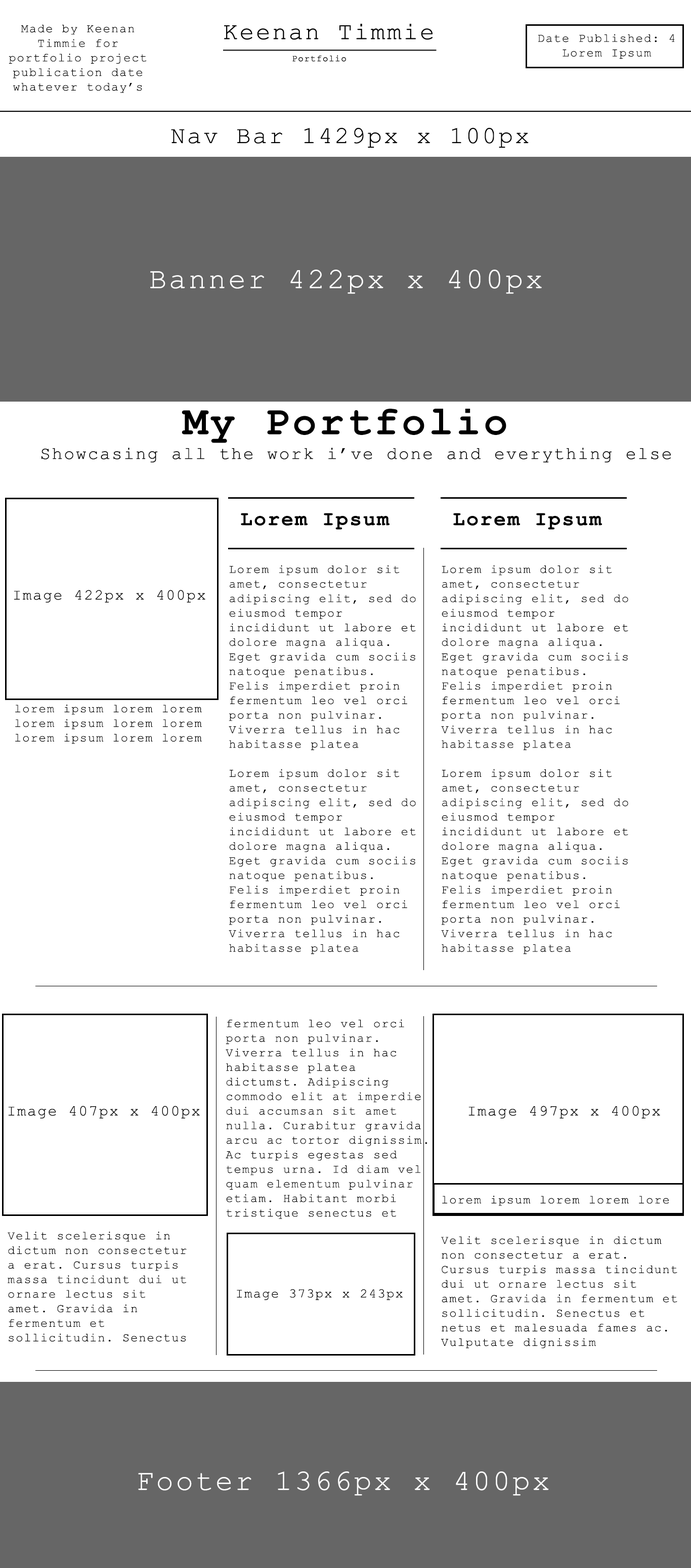
<style>
.page{position:relative;width:691px;height:1568px;background:#ffffff}
.page>*{position:absolute;margin:0}
.t1{font:12.1px "CourierNewPSMT";letter-spacing:0.075em;color:#000000}
.t2{font:24.3px "CourierNewPSMT";letter-spacing:0.075em;color:#000000}
.t3{font:29.3px "CourierNewPSMT";letter-spacing:0.075em;color:#ffffff}
.t4{font:40.5px "CourierNewPS-BoldMT";letter-spacing:0.075em;color:#000000}
.t5{font:17.7px "CourierNewPSMT";letter-spacing:0.075em;color:#000000}
.t6{font:20.2px "CourierNewPS-BoldMT";letter-spacing:0.075em;color:#000000}
.t7{font:15.2px "CourierNewPSMT";letter-spacing:0.075em;color:#000000}
.t8{font:13.1px "CourierNewPSMT";letter-spacing:0.075em;color:#000000}
</style>
<div class="page">
<p class="t1" style="left:9px;top:25px;width:138px;height:68px;text-align:center">Made by Keenan Timmie for portfolio project publication date<br>whatever today’s date is</p>
<p class="t1" style="left:538px;top:34px;width:137px;height:25px;text-align:center">Date Published: 4 Lorem Ipsum</p>
<p class="t2" style="left:171px;top:127px;width:358px;height:21px">Nav Bar 1429px x 100px</p>
<p class="t3" style="left:150px;top:270px;width:392px;height:24px">Banner 422px x 400px</p>
<p class="t4" style="left:182px;top:409px;width:324px;height:34px">My Portfolio</p>
<p class="t5" style="left:41px;top:448px;width:630px;height:15px">Showcasing all the work i’ve done and everything else</p>
<p class="t6" style="left:241px;top:513px;width:149px;height:17px">Lorem Ipsum</p>
<p class="t6" style="left:453px;top:513px;width:149px;height:17px">Lorem Ipsum</p>
<p class="t1" style="left:229px;top:565px;width:187px;height:389px">Lorem ipsum dolor sit amet, consectetur adipiscing elit, sed do eiusmod tempor incididunt ut labore et dolore magna aliqua. Eget gravida cum sociis natoque penatibus. Felis imperdiet proin fermentum leo vel orci porta non pulvinar. Viverra tellus in hac habitasse platea<br><br>Lorem ipsum dolor sit amet, consectetur adipiscing elit, sed do eiusmod tempor incididunt ut labore et dolore magna aliqua. Eget gravida cum sociis natoque penatibus. Felis imperdiet proin fermentum leo vel orci porta non pulvinar. Viverra tellus in hac habitasse platea</p>
<p class="t1" style="left:441px;top:565px;width:187px;height:389px">Lorem ipsum dolor sit amet, consectetur adipiscing elit, sed do eiusmod tempor incididunt ut labore et dolore magna aliqua. Eget gravida cum sociis natoque penatibus. Felis imperdiet proin fermentum leo vel orci porta non pulvinar. Viverra tellus in hac habitasse platea<br><br>Lorem ipsum dolor sit amet, consectetur adipiscing elit, sed do eiusmod tempor incididunt ut labore et dolore magna aliqua. Eget gravida cum sociis natoque penatibus. Felis imperdiet proin fermentum leo vel orci porta non pulvinar. Viverra tellus in hac habitasse platea</p>
<p class="t7" style="left:14px;top:590px;width:191px;height:13px">Image 422px x 400px</p>
<p class="t1" style="left:15px;top:705px;width:187px;height:39px">lorem ipsum lorem lorem lorem ipsum lorem lorem  lorem ipsum lorem lorem</p>
<p class="t1" style="left:226px;top:1019px;width:201px;height:200px">fermentum leo vel orci porta non pulvinar. Viverra tellus in hac habitasse platea dictumst. Adipiscing commodo elit at imperdie dui accumsan sit amet nulla. Curabitur gravida arcu ac tortor dignissim. Ac turpis egestas sed tempus urna. Id diam vel quam elementum pulvinar etiam. Habitant morbi tristique senectus et netus et malesuada fames ac. Nunc pulvinar sapien et ligula ullamcorper</p>
<p class="t7" style="left:8px;top:1106px;width:192px;height:13px">Image 407px x 400px</p>
<p class="t7" style="left:468px;top:1106px;width:192px;height:13px">Image 497px x 400px</p>
<p class="t1" style="left:442px;top:1196px;width:227px;height:10px">lorem ipsum lorem lorem lore</p>
<p class="t1" style="left:8px;top:1232px;width:179px;height:110px">Velit scelerisque in dictum non consectetur a erat. Cursus turpis massa tincidunt dui ut ornare lectus sit amet. Gravida in fermentum et sollicitudin. Senectus et netus et malesuada fames ac. Vulputate dignissim suspendisse in est ante in. In nulla posuere sollicitudin aliquam ultrices sagittis orci a scelerisque. Accumsan sit amet nulla</p>
<p class="t1" style="left:441px;top:1236px;width:236px;height:112px">Velit scelerisque in dictum non consectetur a erat. Cursus turpis massa tincidunt dui ut ornare lectus sit amet. Gravida in fermentum et sollicitudin. Senectus et netus et malesuada fames ac. Vulputate dignissim suspendisse in est ante in. In nulla posuere sollicitudin aliquam ultrices sagittis orci a scelerisque. Accumsan sit amet nulla</p>
<p class="t8" style="left:237px;top:1289px;width:166px;height:11px">Image 373px x 243px</p>
<p class="t3" style="left:138px;top:1471px;width:411px;height:25px">Footer 1366px x 400px</p>
</div>
